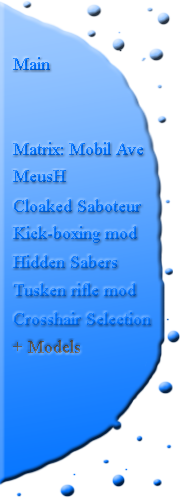
<style>
.page{position:relative;width:180px;height:500px;background:#ffffff}
.page>*{position:absolute;margin:0}
.t1{font:18px "TimesNewRomanPSMT"}
.t2{font:18px "TimesNewRomanPSMT";color:#585858}
</style>
<div class="page">
<p class="t1" style="left:13px;top:57px;width:37px;height:13px">Main</p>
<p class="t1" style="left:13px;top:142px;width:130px;height:13px">Matrix: Mobil Ave</p>
<p class="t1" style="left:13px;top:170px;width:53px;height:12px">MeusH</p>
<p class="t1" style="left:14px;top:199px;width:127px;height:13px">Cloaked Saboteur</p>
<p class="t1" style="left:13px;top:226px;width:124px;height:17px">Kick-boxing mod</p>
<p class="t1" style="left:13px;top:255px;width:104px;height:13px">Hidden Sabers</p>
<p class="t1" style="left:14px;top:283px;width:122px;height:13px">Tusken rifle mod</p>
<p class="t1" style="left:14px;top:312px;width:137px;height:13px">Crosshair Selection</p>
<p class="t2" style="left:13px;top:340px;width:67px;height:13px">+ Models</p>
</div>
